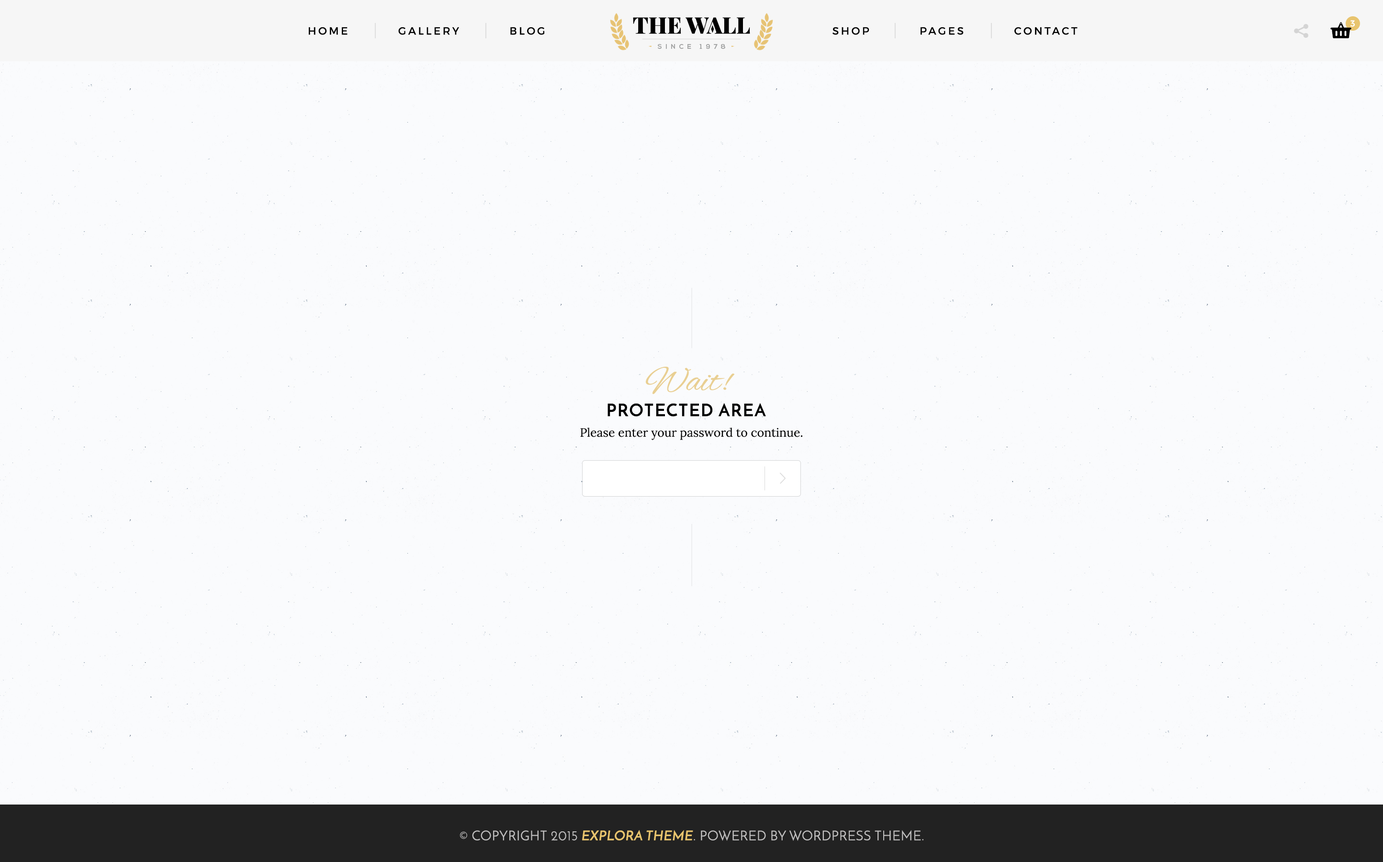
<style>
.page{position:relative;width:1383px;height:862px;background:#fafbfd}
.page>*{position:absolute;margin:0}
.t1{font:10.5px "Montserrat-Regular";letter-spacing:0.2em;color:#000000;text-transform:uppercase}
.t2{font:8.6px "Montserrat-Regular";letter-spacing:0.2em;color:#ffffff;text-transform:uppercase}
.t3{font:36.4px "AlexBrush-Regular";color:#e9cf92}
.t4{font:17.2px "JosefinSans-Bold";letter-spacing:0.06em;color:#000000;text-transform:uppercase}
.t5{font:12px "Lora-Regular";color:#000000}
.t6{font:13.4px "JosefinSans";letter-spacing:0.02em;color:#c1c0c0;text-transform:uppercase}
.t7{font:13.4px "JosefinSans-SemiBold";letter-spacing:0.02em;color:#e8c46e;text-transform:uppercase}
</style>
<div class="page">
<p class="t1" style="left:309px;top:27px;width:769px;height:8px">HOME          GALLERY          BLOG                                                           SHOP          PAGES          CONTACT</p>
<p class="t2" style="left:1350px;top:20px;width:5px;height:7px">3</p>
<p class="t3" style="left:646px;top:366px;width:89px;height:28px">Wait!</p>
<p class="t4" style="left:608px;top:403px;width:158px;height:14px">protected area</p>
<p class="t5" style="left:580px;top:428px;width:223px;height:12px">Please enter your password to continue.</p>
<p class="t6" style="left:460px;top:830px;width:464px;height:11px">© COPYRIGHT 2015 <span class="t7">EXPLORA THEME</span>. POWERED BY WORDPRESS THEME.</p>
</div>
